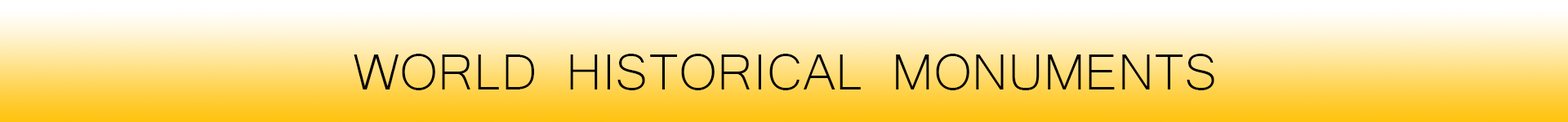
<style>
.page{position:relative;width:1568px;height:122px}
.page>*{position:absolute;margin:0}
.t1{font:65.3px "Microsoft-Yi-Baiti";color:#000000}
</style>
<div class="page">
<p class="t1" style="left:354px;top:54px;width:860px;height:37px">WORLD HISTORICAL MONUMENTS</p>
</div>
